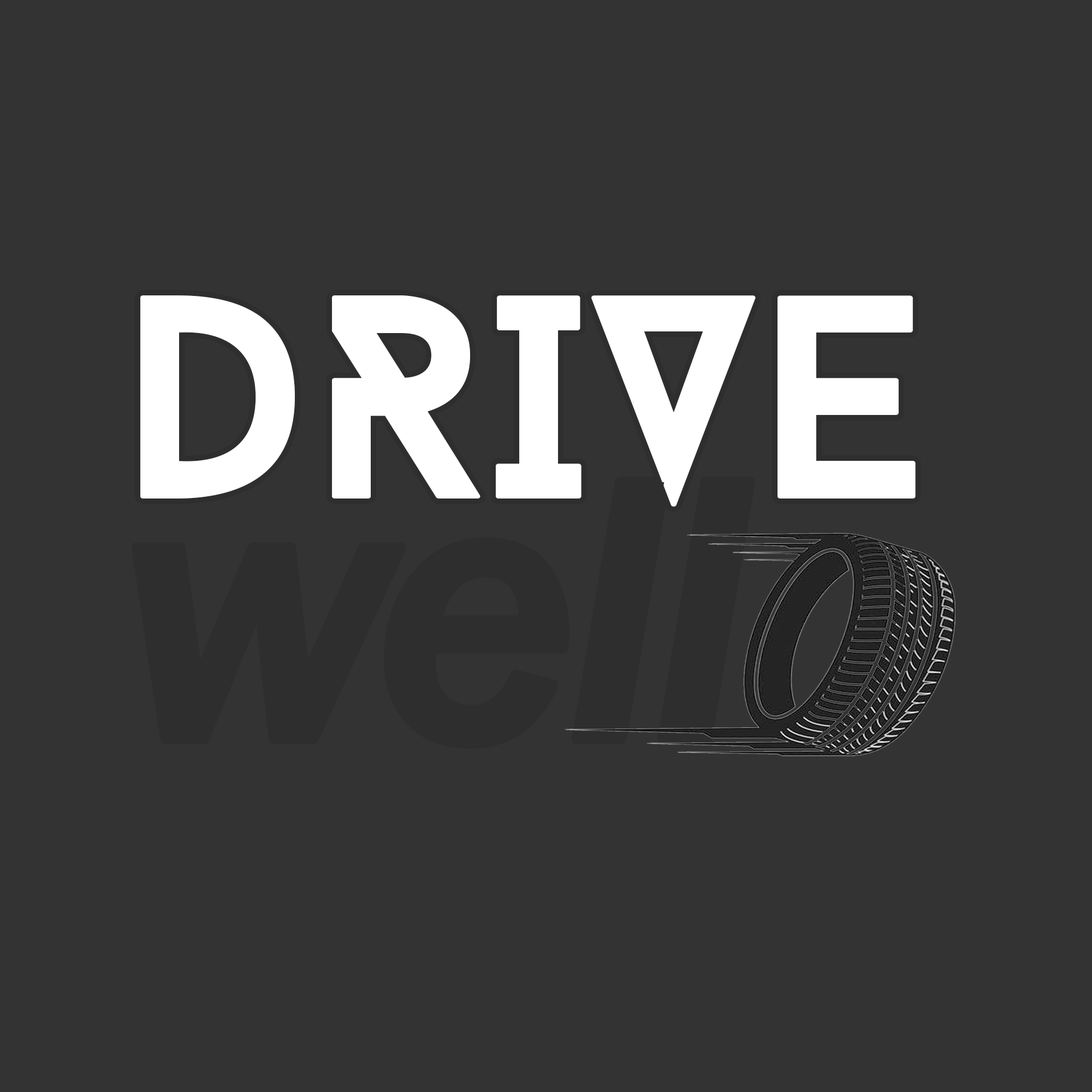
<style>
.page{position:relative;width:1092px;height:1092px;background:#333333}
.page>*{position:absolute;margin:0}
.t1{font:289.8px/240.6px "BaronNeueBold";color:#ffffff}
.t2{font:385px/240.6px "FranklinGothic-MediumItalic";letter-spacing:-0.025em;color:#2e2e2e}
</style>
<div class="page">
<p class="t1" style="left:136px;top:295px;width:780px;height:449px">DRIVE<br><span class="t2">well</span></p>
</div>
